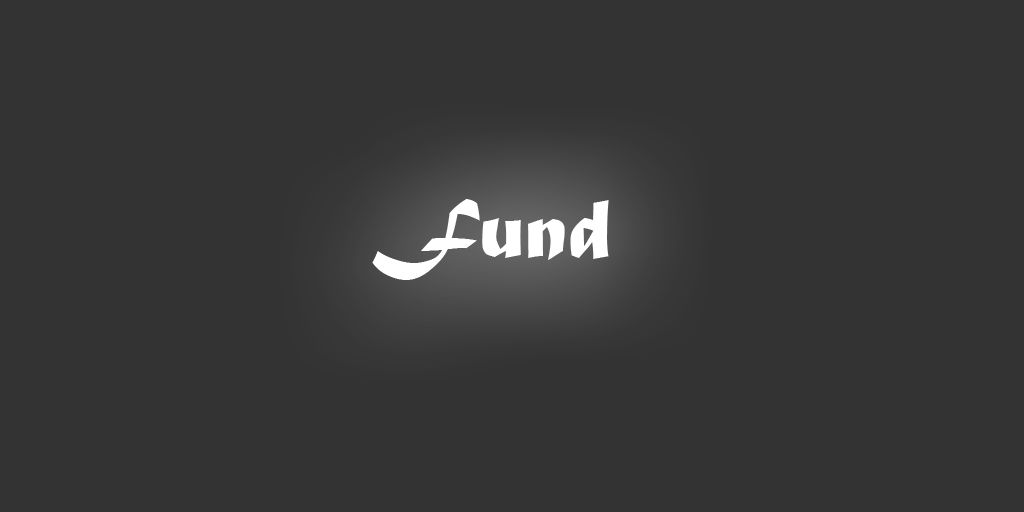
<style>
.page{position:relative;width:1024px;height:512px;background:#333333}
.page>*{position:absolute;margin:0}
.t1{font:89px "MaturaMTScriptCapitals";color:#ffffff}
</style>
<div class="page">
<p class="t1" style="left:372px;top:199px;width:237px;height:81px">Fund</p>
</div>
